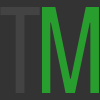
<style>
.page{position:relative;width:100px;height:100px;background:#333333}
.page>*{position:absolute;margin:0}
.t1{font:125px "SairaExtraCondensed-Regular";color:#434343}
.t2{font:125px "SairaExtraCondensed-Regular";color:#289e2e}
</style>
<div class="page">
<p class="t1" style="left:0px;top:7px;width:40px;height:86px">T</p>
<p class="t2" style="left:42px;top:7px;width:57px;height:86px">M</p>
</div>
